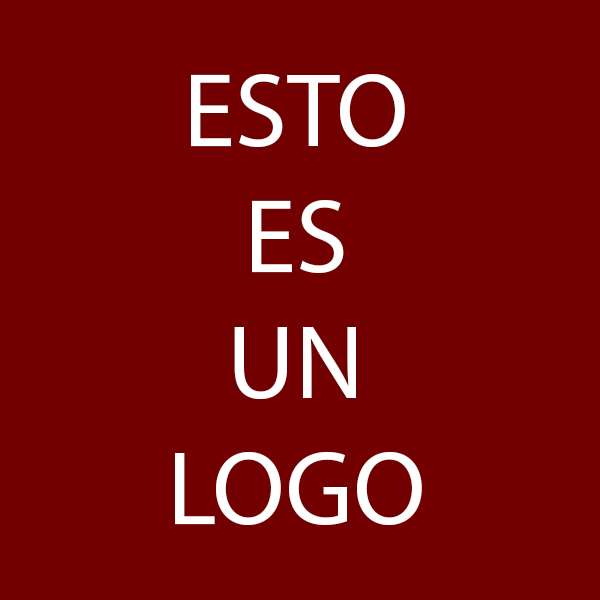
<style>
.page{position:relative;width:600px;height:600px;background:#730000}
.page>*{position:absolute;margin:0}
.t1{font:105px "MyriadPro-Regular";color:#ffffff}
</style>
<div class="page">
<p class="t1" style="left:175px;top:73px;width:247px;height:452px;text-align:center">ESTO<br>ES<br>UN<br>LOGO</p>
</div>
